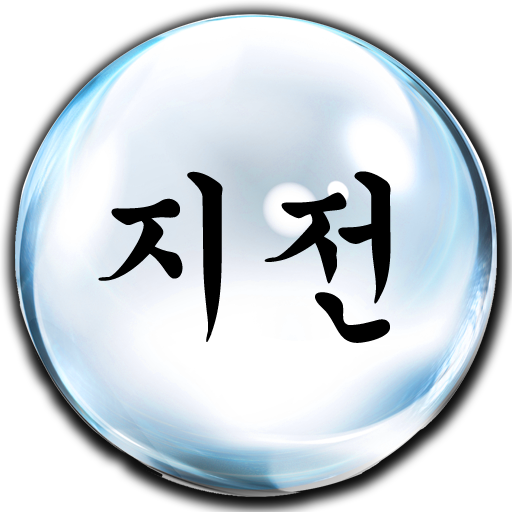
<style>
.page{position:relative;width:512px;height:512px;background:#ffffff}
.page>*{position:absolute;margin:0}
.t1{font:176.7px "Gungsuh";color:#000000;scale:0.95 1}
</style>
<div class="page">
<p class="t1" style="left:98px;top:171px;width:293px;height:172px">지전</p>
</div>
